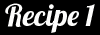
<style>
.page{position:relative;width:100px;height:35px;background:#000000}
.page>*{position:absolute;margin:0}
.t1{font:30px "Lobster1.4";color:#fdfdfc}
</style>
<div class="page">
<p class="t1" style="left:5px;top:3px;width:90px;height:30px">Recipe 1</p>
</div>
